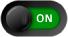
<style>
.page{position:relative;width:68px;height:37px}
.page>*{position:absolute;margin:0}
.t1{font:11.6px "Colaborate-Regular";color:#ffffff;font-weight:bold}
</style>
<div class="page">
<p class="t1" style="left:36px;top:14px;width:16px;height:9px">ON</p>
</div>
